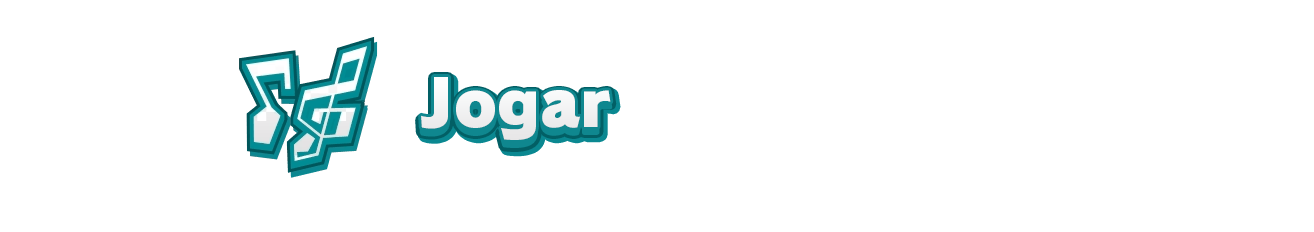
<style>
.page{position:relative;width:1314px;height:232px;background:#ffffff}
.page>*{position:absolute;margin:0}
.t1{font:69.5px "RodinPro-UB";color:#efeff0;scale:0.92 1}
.t2{font:64px "RodinPro-UB";color:#f2f2f3}
</style>
<div class="page">
<p class="t1" style="left:421px;top:78px;width:190px;height:68px">Jogar</p>
<p class="t2" style="left:421px;top:77px;width:190px;height:63px">Jogar</p>
</div>
